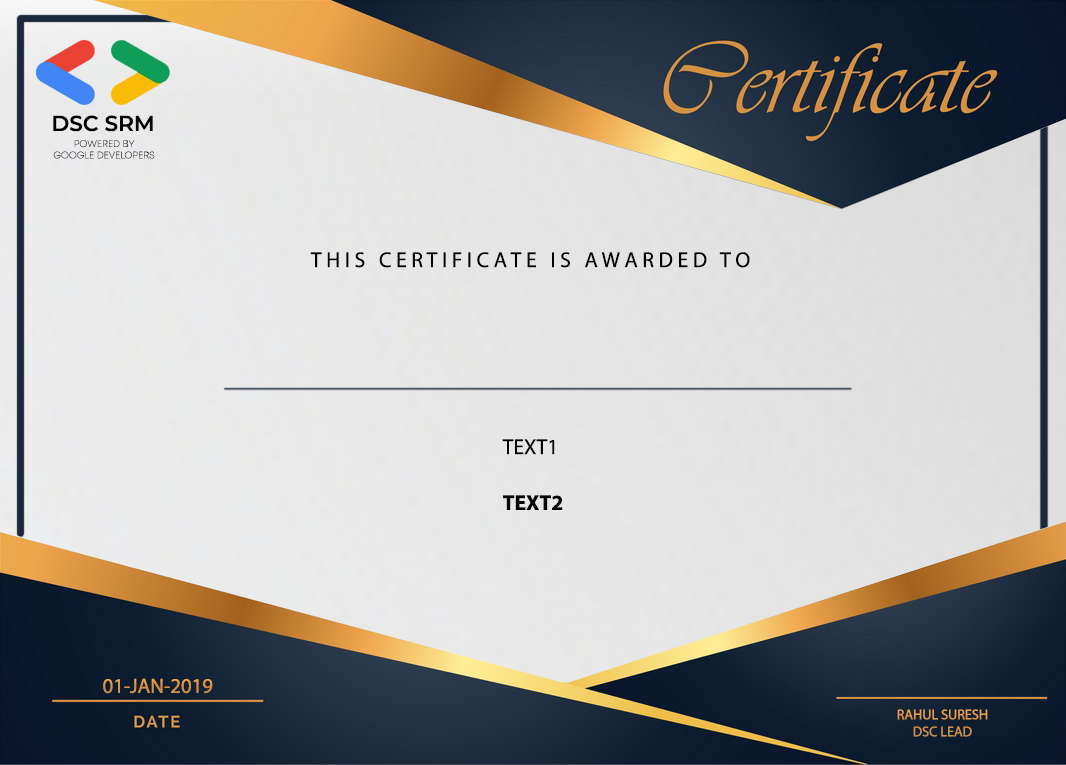
<style>
.page{position:relative;width:1066px;height:765px}
.page>*{position:absolute;margin:0}
.t1{font:21.6px "Montserrat-SemiBold";color:#000000}
.t2{font:9.5px "Mont-ExtraLightDEMO";color:#1f1f1f}
.t3{font:21.6px "MyriadPro-Regular";color:#000000}
.t4{font:21.6px "MyriadPro-Bold";color:#000000}
.t5{font:20.8px "MyriadPro-Regular";color:#d79345}
.t6{font:14.2px "MyriadPro-Regular";color:#e29947}
</style>
<div class="page">
<p class="t1" style="left:53px;top:115px;width:100px;height:17px">DSC SRM</p>
<p class="t2" style="left:53px;top:140px;width:102px;height:19px;text-align:center">POWERED BY<br>GOOGLE DEVELOPERS</p>
<p class="t3" style="left:310px;top:252px;width:440px;height:16px">T H I S   C E R T I F I C A T E   I S   A W A R D E D   T O</p>
<p class="t3" style="left:502px;top:439px;width:53px;height:16px">TEXT1</p>
<p class="t4" style="left:503px;top:495px;width:60px;height:15px">TEXT2</p>
<p class="t5" style="left:103px;top:678px;width:110px;height:16px">01-JAN-2019</p>
<p class="t6" style="left:897px;top:709px;width:91px;height:28px;text-align:center">RAHUL SURESH<br>DSC LEAD</p>
</div>
